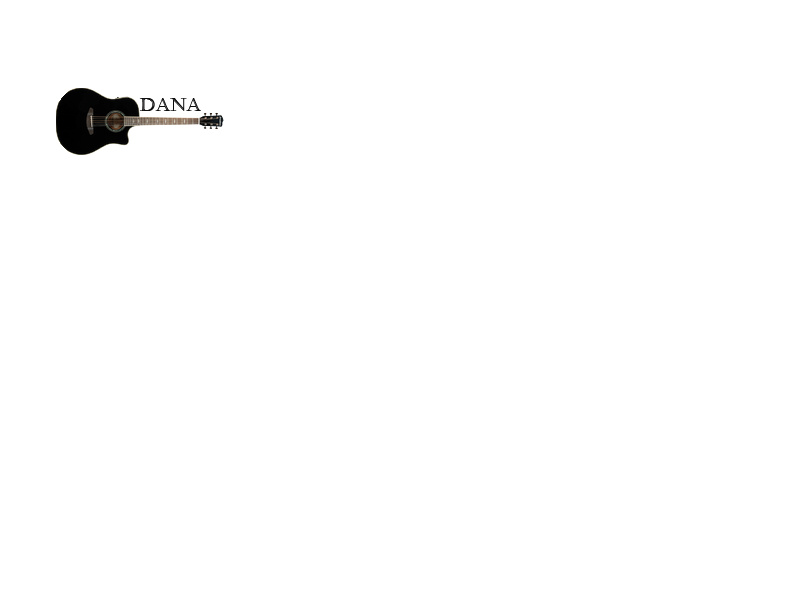
<style>
.page{position:relative;width:800px;height:600px;background:#ffffff}
.page>*{position:absolute;margin:0}
.t1{font:18px "Castellar";color:#0d0c0c}
</style>
<div class="page">
<p class="t1" style="left:139px;top:98px;width:62px;height:13px">dana</p>
</div>
